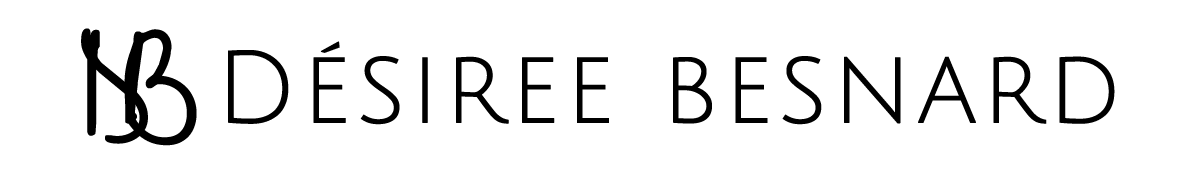
<style>
.page{position:relative;width:1200px;height:176px;background:#ffffff}
.page>*{position:absolute;margin:0}
.t1{font:138.9px "Cedarville-Cursive";letter-spacing:0.025em;color:#000000;font-weight:bold}
.t2{font:100px "JuliusSansOne-Regular";letter-spacing:0.025em;color:#000000;font-weight:bold}
</style>
<div class="page">
<p class="t1" style="left:81px;top:28px;width:67px;height:116px">D</p>
<p class="t1" style="left:124px;top:29px;width:73px;height:117px">B</p>
<p class="t2" style="left:228px;top:41px;width:887px;height:84px">Désiree besnard</p>
</div>
